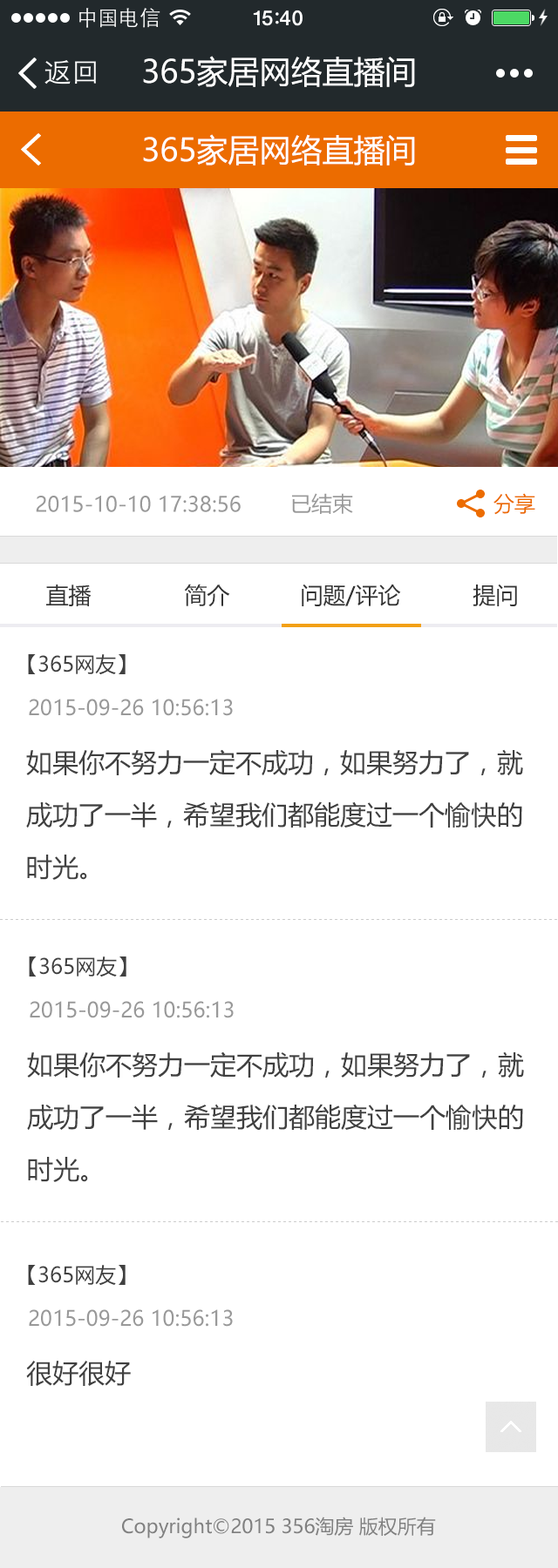
<style>
.page{position:relative;width:558px;height:1568px;background:#ffffff}
.page>*{position:absolute;margin:0}
.t1{font:31.4px "MicrosoftYaHei";color:#ffffff}
.t2{font:20.9px "MicrosoftYaHei";color:#999999}
.t3{font:20.9px "MicrosoftYaHei";color:#ec6c00}
.t4{font:22.6px "MicrosoftYaHei";color:#333333}
.t5{font:20.9px "MicrosoftYaHei";color:#404040}
.t6{font:26.1px/52.3px "MicrosoftYaHei";color:#404040}
.t7{font:26.1px "MicrosoftYaHei";color:#404040}
.t8{font:19.2px "MicrosoftYaHei";color:#808080}
</style>
<div class="page">
<p class="t1" style="left:143px;top:56px;width:272px;height:31px">365家居网络直播间</p>
<p class="t1" style="left:143px;top:134px;width:272px;height:32px">365家居网络直播间</p>
<p class="t2" style="left:36px;top:496px;width:204px;height:16px">2015-10-10 17:38:56</p>
<p class="t2" style="left:292px;top:493px;width:61px;height:21px">已结束</p>
<p class="t3" style="left:493px;top:493px;width:42px;height:22px">分享</p>
<p class="t4" style="left:46px;top:585px;width:45px;height:21px">直播</p>
<p class="t4" style="left:184px;top:584px;width:46px;height:23px">简介</p>
<p class="t4" style="left:301px;top:584px;width:100px;height:23px">问题/评论</p>
<p class="t4" style="left:472px;top:584px;width:45px;height:22px">提问</p>
<p class="t5" style="left:28px;top:654px;width:97px;height:21px">【365网友】</p>
<p class="t2" style="left:29px;top:699px;width:204px;height:17px">2015-09-26 10:56:13</p>
<p class="t6" style="left:26px;top:749px;width:497px;height:131px">如果你不努力一定不成功，如果努力了，就成功了一半，希望我们都能度过一个愉快的时光。</p>
<p class="t5" style="left:29px;top:956px;width:97px;height:21px">【365网友】</p>
<p class="t2" style="left:30px;top:1001px;width:203px;height:17px">2015-09-26 10:56:13</p>
<p class="t6" style="left:27px;top:1051px;width:497px;height:131px">如果你不努力一定不成功，如果努力了，就成功了一半，希望我们都能度过一个愉快的时光。</p>
<p class="t5" style="left:28px;top:1265px;width:97px;height:21px">【365网友】</p>
<p class="t2" style="left:29px;top:1309px;width:204px;height:18px">2015-09-26 10:56:13</p>
<p class="t7" style="left:26px;top:1361px;width:105px;height:25px">很好很好</p>
<p class="t8" style="left:122px;top:1517px;width:314px;height:21px">Copyright©2015 356淘房 版权所有</p>
</div>
